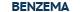
<style>
.page{position:relative;width:80px;height:12px;background:#ffffff}
.page>*{position:absolute;margin:0}
.t1{font:12.5px "PTSans-CaptionBold";color:#0d385a}
</style>
<div class="page">
<p class="t1" style="left:12px;top:2px;width:58px;height:9px">BENZEMA</p>
</div>
